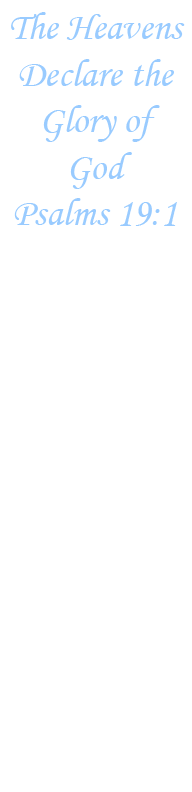
<style>
.page{position:relative;width:192px;height:792px;background:#ffffff}
.page>*{position:absolute;margin:0}
.t1{font:38.7px "MonotypeCorsiva";color:#99ccff}
</style>
<div class="page">
<p class="t1" style="left:11px;top:12px;width:174px;height:214px;text-align:center">The Heavens<br>Declare the<br>Glory of<br>God<br>Psalms 19:1</p>
</div>
